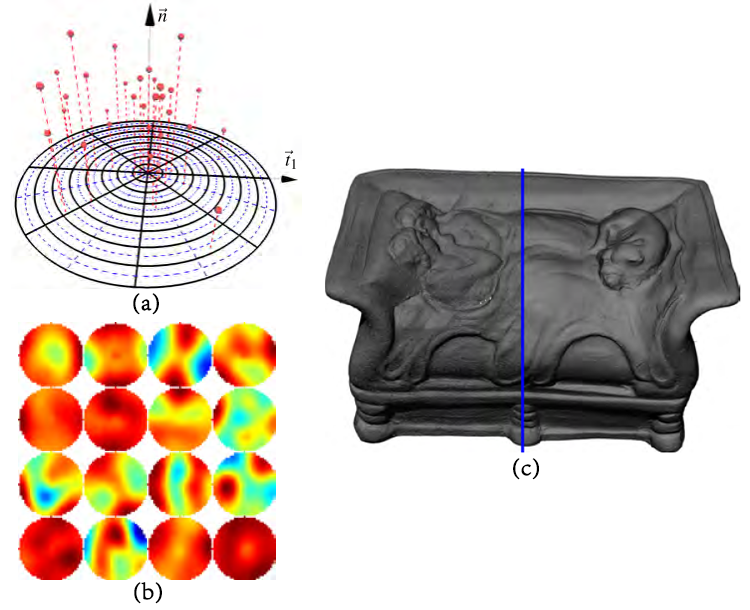
<style>
.page{position:relative;width:750px;height:610px;background:#ffffff}
.page>*{position:absolute;margin:0}
.t1{font:24px "AdobeSongStd-Light";color:#000000;font-weight:bold}
</style>
<div class="page">
<p class="t1" style="left:133px;top:293px;width:26px;height:22px">(a)</p>
<p class="t1" style="left:513px;top:458px;width:26px;height:22px">(c)</p>
<p class="t1" style="left:134px;top:582px;width:28px;height:22px">(b)</p>
</div>
